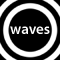
<style>
.page{position:relative;width:60px;height:60px;background:#000000}
.page>*{position:absolute;margin:0}
.t1{font:15px "MyriadPro-Semibold";color:#ffffff}
</style>
<div class="page">
<p class="t1" style="left:10px;top:26px;width:40px;height:8px">waves</p>
</div>
